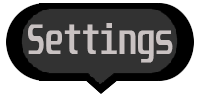
<style>
.page{position:relative;width:200px;height:100px;background:#323232}
.page>*{position:absolute;margin:0}
.t1{font:36.7px "Unispace-Bold";color:#c9c2c2;scale:0.82 1}
</style>
<div class="page">
<p class="t1" style="left:28px;top:23px;width:145px;height:40px">Settings</p>
</div>
